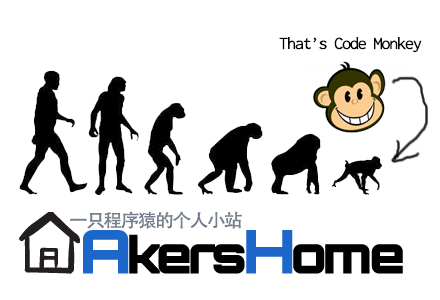
<style>
.page{position:relative;width:440px;height:300px;background:#ffffff}
.page>*{position:absolute;margin:0}
.t1{font:18px "Inconsolata";letter-spacing:-0.08em;color:#030303;scale:1.04 1}
.t2{font:18px "AdobeHeitiStd-Regular";letter-spacing:-0.08em;color:#747e8d;scale:1.04 1}
</style>
<div class="page">
<p class="t1" style="left:279px;top:37px;width:143px;height:16px">That’s Code Monkey</p>
<p class="t2" style="left:70px;top:211px;width:172px;height:18px">一只程序猿的个人小站</p>
</div>
